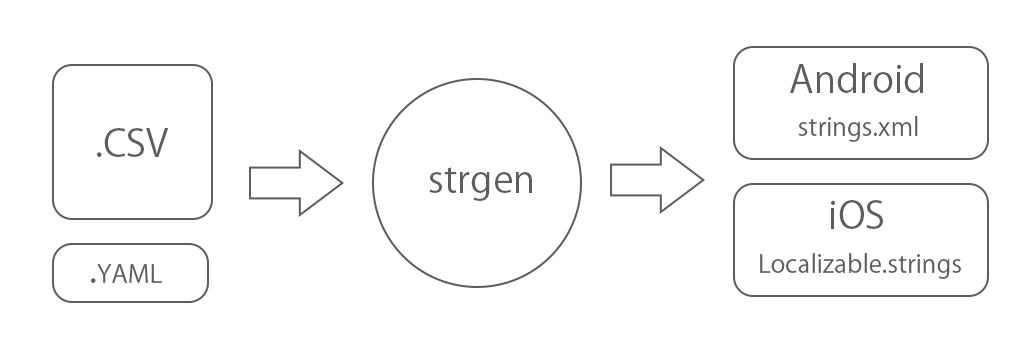
<style>
.page{position:relative;width:1024px;height:360px;background:#ffffff}
.page>*{position:absolute;margin:0}
.t1{font:37.5px "KozGoPr6N-Regular";color:#5e5c5c}
.t2{font:25px "KozGoPr6N-Regular";color:#5e5c5c}
</style>
<div class="page">
<p class="t1" style="left:790px;top:63px;width:134px;height:30px">Android</p>
<p class="t2" style="left:798px;top:116px;width:120px;height:26px">strings.xml</p>
<p class="t1" style="left:97px;top:128px;width:72px;height:29px">.CSV</p>
<p class="t1" style="left:429px;top:167px;width:103px;height:34px">strgen</p>
<p class="t1" style="left:831px;top:200px;width:52px;height:29px">iOS</p>
<p class="t2" style="left:760px;top:253px;width:201px;height:26px">Localizable.strings</p>
<p class="t2" style="left:91px;top:264px;width:71px;height:19px"><span class="t1">.</span>YAML</p>
</div>
